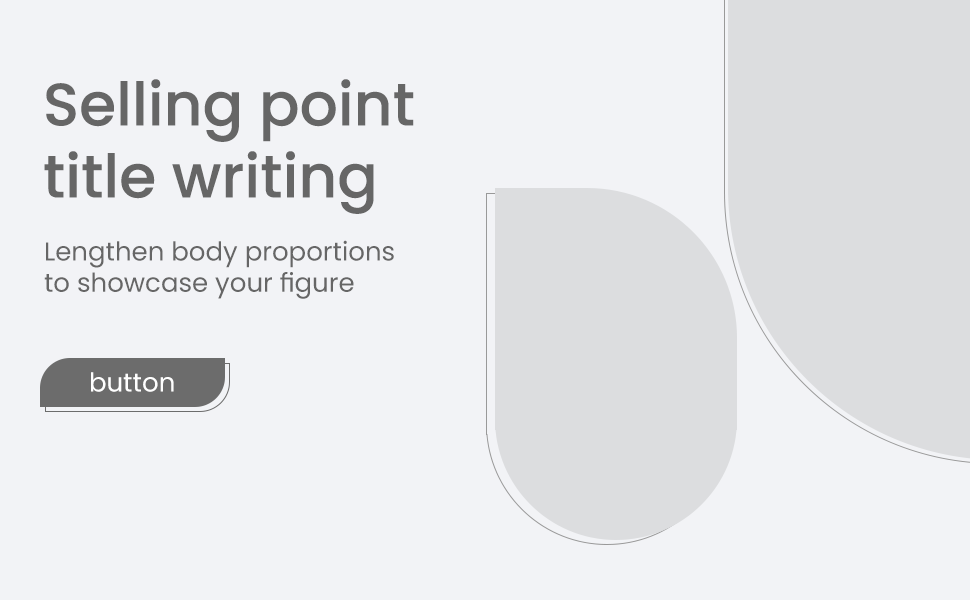
<style>
.page{position:relative;width:970px;height:600px;background:#f2f3f6}
.page>*{position:absolute;margin:0}
.t1{font:60px "Poppins-Medium";color:#666666}
.t2{font:26px "Poppins-Regular";color:#666666}
.t3{font:26px "Poppins-Regular";color:#ffffff}
</style>
<div class="page">
<p class="t1" style="left:44px;top:79px;width:370px;height:135px">Selling point<br>title writing</p>
<p class="t2" style="left:44px;top:240px;width:350px;height:59px">Lengthen body proportions<br>to showcase your figure</p>
<p class="t3" style="left:91px;top:372px;width:83px;height:20px">button</p>
</div>
